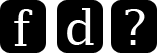
<style>
.page{position:relative;width:157px;height:53px;background:#000000}
.page>*{position:absolute;margin:0}
.t1{font:48px "LucidaFax";letter-spacing:0.24em;color:#ffffff}
</style>
<div class="page">
<p class="t1" style="left:14px;top:9px;width:19px;height:37px">f</p>
<p class="t1" style="left:67px;top:8px;width:27px;height:37px">d</p>
<p class="t1" style="left:125px;top:9px;width:20px;height:36px">?</p>
</div>
